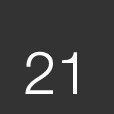
<style>
.page{position:relative;width:114px;height:114px;background:#333333}
.page>*{position:absolute;margin:0}
.t1{font:59.4px "HelveticaNeue-Light";color:#fefefe}
</style>
<div class="page">
<p class="t1" style="left:25px;top:51px;width:52px;height:43px">21</p>
</div>
